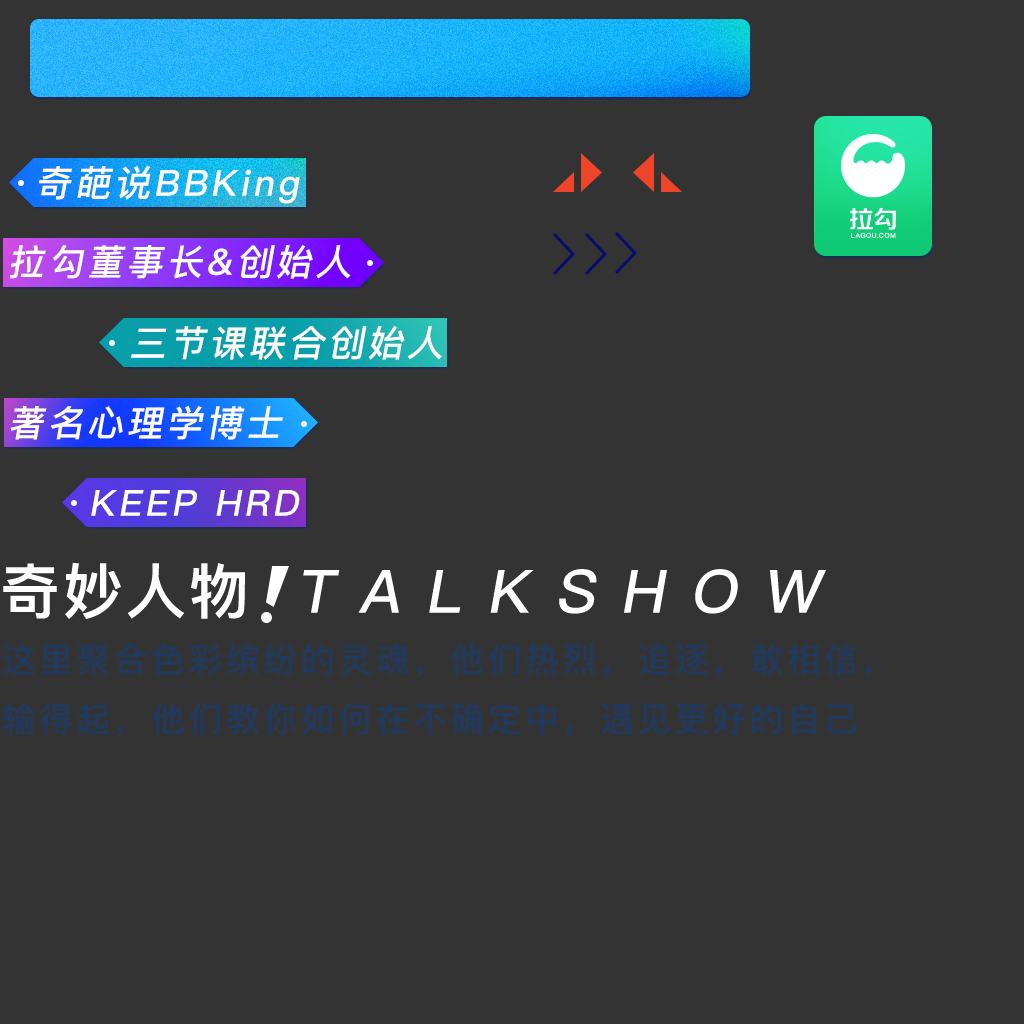
<style>
.page{position:relative;width:1024px;height:1024px;background:#333333}
.page>*{position:absolute;margin:0}
.t1{font:36px "PingFangSC-Medium";letter-spacing:0.1em;color:#fefbff;font-style:italic}
.t2{font:36px "PingFangSC-Medium";letter-spacing:0.1em;color:#ffffff;font-style:italic}
.t3{font:60px "PingFangSC-Semibold";letter-spacing:0.05em;color:#ffffff}
.t4{font:60px "PingFangSC-Medium";letter-spacing:0.05em;color:#ffffff;text-transform:uppercase;font-style:italic}
.t5{font:34px "PingFangSC-Medium";letter-spacing:0.1em;color:#203a5f}
</style>
<div class="page">
<p class="t1" style="left:39px;top:166px;width:261px;height:38px">奇葩说BBKing</p>
<p class="t2" style="left:10px;top:245px;width:341px;height:34px">拉勾董事长&amp;创始人</p>
<p class="t2" style="left:131px;top:326px;width:311px;height:34px">三节课联合创始人</p>
<p class="t2" style="left:10px;top:405px;width:273px;height:35px">著名心理学博士</p>
<p class="t2" style="left:91px;top:490px;width:209px;height:26px">KEEP HRD</p>
<p class="t3" style="left:3px;top:562px;width:242px;height:57px">奇妙人物</p>
<p class="t4" style="left:303px;top:569px;width:524px;height:45px">T a l k S h o w</p>
<p class="t5" style="left:2px;top:643px;width:870px;height:95px">这里聚合色彩缤纷的灵魂，他们热烈，追逐，敢相信，<br>输得起，他们教你如何在不确定中，遇见更好的自己</p>
</div>
